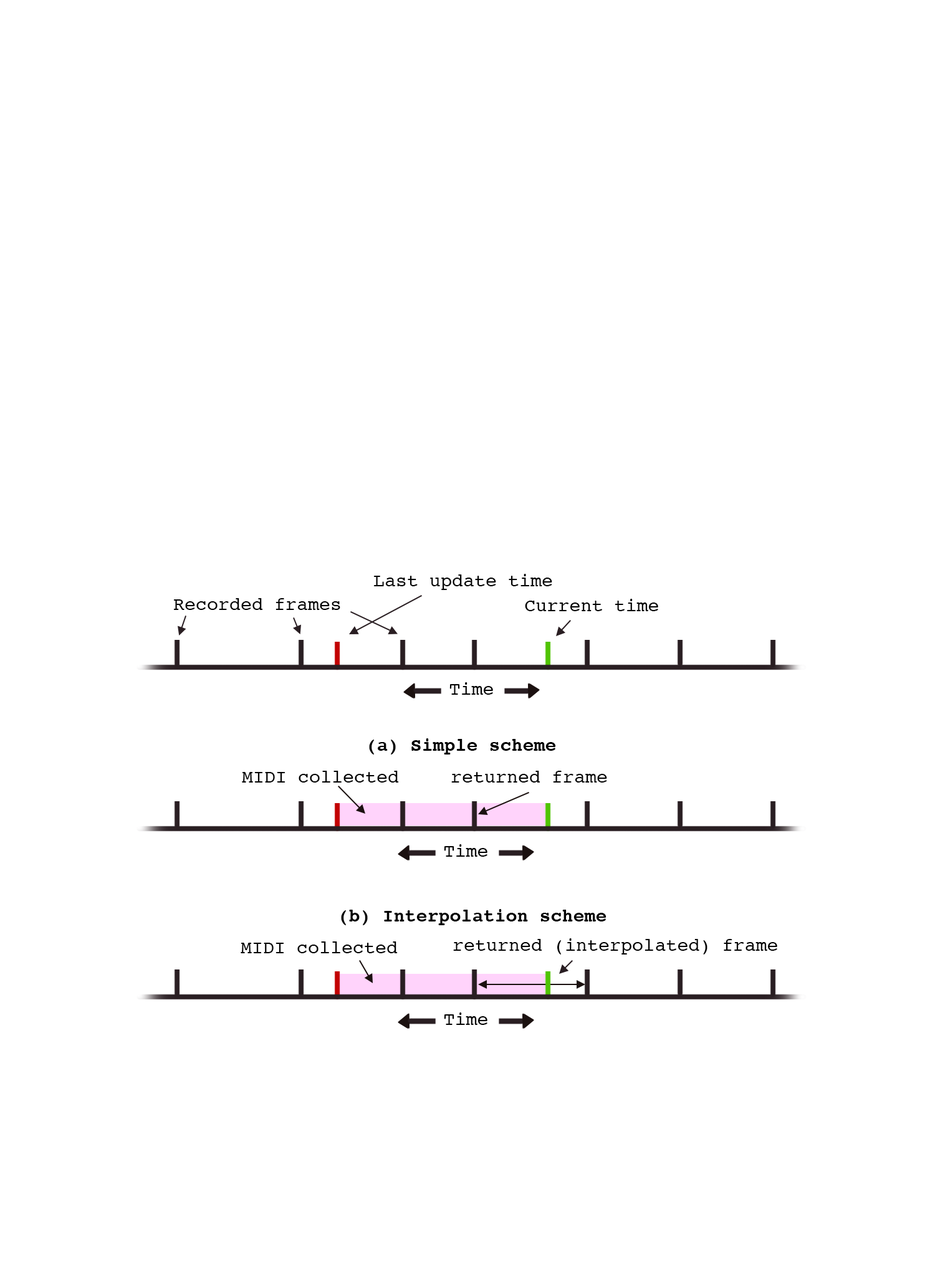
<style>
.page{position:relative;width:935px;height:1276px;background:#ffffff}
.page>*{position:absolute;margin:0}
.t1{font:18.7px "Courier";color:#000000}
.t2{font:18.7px "Courier-Bold";color:#000000}
</style>
<div class="page">
<p class="t1" style="left:373px;top:574px;width:179px;height:16px">Last update time</p>
<p class="t1" style="left:173px;top:598px;width:167px;height:12px">Recorded frames</p>
<p class="t1" style="left:525px;top:599px;width:133px;height:12px">Current time</p>
<p class="t1" style="left:449px;top:682px;width:44px;height:13px">Time</p>
<p class="t2" style="left:369px;top:738px;width:187px;height:16px">(a) Simple scheme</p>
<p class="t1" style="left:242px;top:771px;width:157px;height:12px">MIDI collected</p>
<p class="t1" style="left:451px;top:771px;width:156px;height:12px">returned frame</p>
<p class="t1" style="left:444px;top:844px;width:43px;height:13px">Time</p>
<p class="t2" style="left:341px;top:909px;width:265px;height:16px">(b) Interpolation scheme</p>
<p class="t1" style="left:240px;top:941px;width:157px;height:12px">MIDI collected</p>
<p class="t1" style="left:453px;top:938px;width:324px;height:16px">returned (interpolated) frame</p>
<p class="t1" style="left:444px;top:1012px;width:43px;height:13px">Time</p>
</div>
